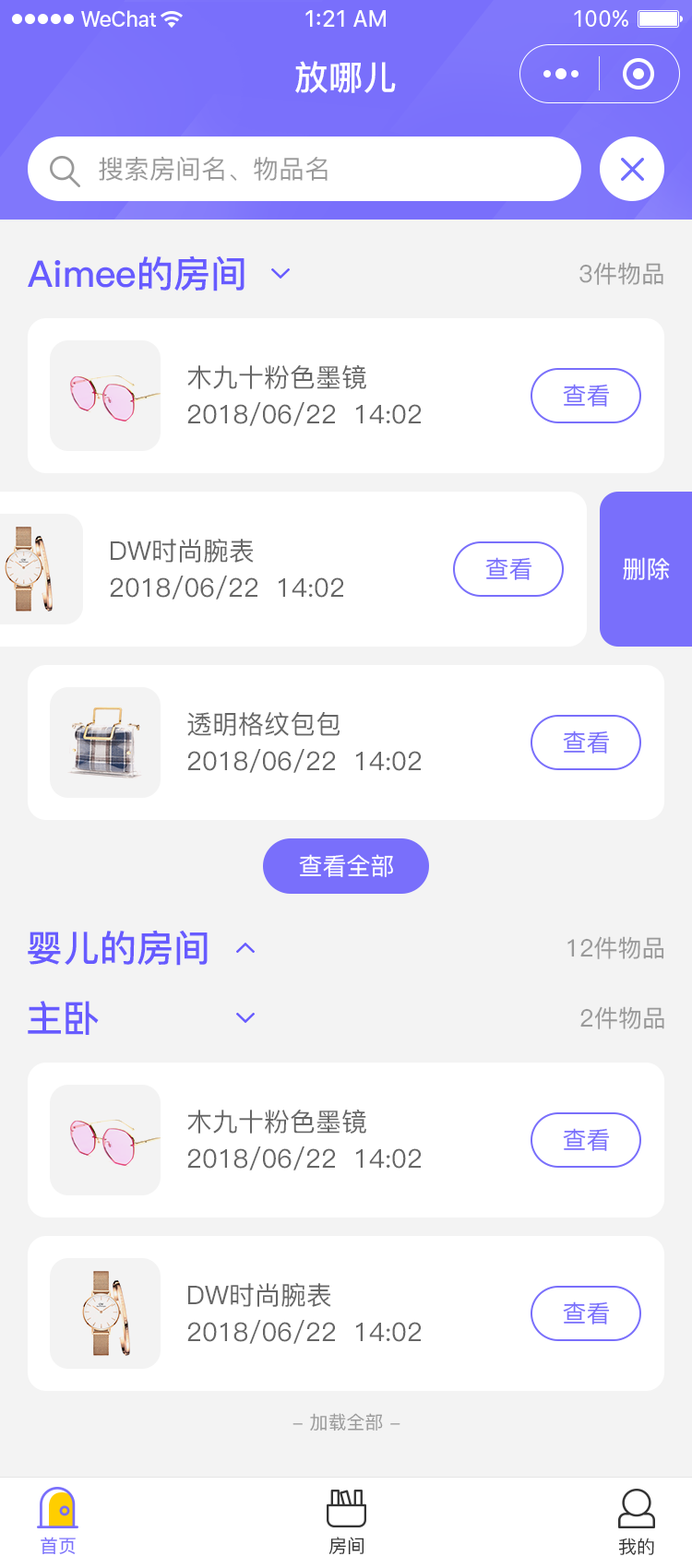
<style>
.page{position:relative;width:692px;height:1568px;background:#ffffff}
.page>*{position:absolute;margin:0}
.t1{font:34.1px "PingFang-SC-Bold";color:#ffffff}
.t2{font:25.8px "PingFang-SC-Medium";color:#999999}
.t3{font:36.9px "PingFang-SC-Bold";color:#675bff}
.t4{font:24px "PingFang-SC-Medium";color:#999999}
.t5{font:25.8px "PingFang-SC-Medium";color:#666666}
.t6{font:24px "PingFang-SC-Medium";color:#796ffb}
.t7{font:24px "PingFang-SC-Medium";color:#ffffff}
.t8{font:18.4px "PingFang-SC-Medium";color:#999999}
.t9{font:18.4px "PingFang-SC-Medium";color:#796ffb}
.t10{font:18.4px "PingFang-SC-Medium";color:#333333}
</style>
<div class="page">
<p class="t1" style="left:295px;top:61px;width:101px;height:32px">放哪儿</p>
<p class="t2" style="left:99px;top:156px;width:228px;height:25px">搜索房间名、物品名</p>
<p class="t3" style="left:28px;top:255px;width:216px;height:36px">Aimee的房间</p>
<p class="t4" style="left:579px;top:262px;width:84px;height:23px">3件物品</p>
<p class="t5" style="left:187px;top:364px;width:179px;height:25px">木九十粉色墨镜</p>
<p class="t6" style="left:563px;top:384px;width:47px;height:23px">查看</p>
<p class="t5" style="left:187px;top:402px;width:234px;height:24px">2018/06/22  14:02</p>
<p class="t5" style="left:111px;top:539px;width:143px;height:24px">DW时尚腕表</p>
<p class="t6" style="left:485px;top:557px;width:47px;height:23px">查看</p>
<p class="t7" style="left:623px;top:557px;width:47px;height:23px">删除</p>
<p class="t5" style="left:110px;top:576px;width:233px;height:24px">2018/06/22  14:02</p>
<p class="t5" style="left:187px;top:712px;width:152px;height:24px">透明格纹包包</p>
<p class="t6" style="left:563px;top:731px;width:47px;height:23px">查看</p>
<p class="t5" style="left:187px;top:749px;width:234px;height:24px">2018/06/22  14:02</p>
<p class="t7" style="left:299px;top:854px;width:94px;height:23px">查看全部</p>
<p class="t3" style="left:28px;top:930px;width:180px;height:36px">婴儿的房间</p>
<p class="t4" style="left:567px;top:936px;width:97px;height:23px">12件物品</p>
<p class="t3" style="left:28px;top:1001px;width:71px;height:34px">主卧</p>
<p class="t4" style="left:580px;top:1006px;width:84px;height:23px">2件物品</p>
<p class="t5" style="left:187px;top:1109px;width:179px;height:25px">木九十粉色墨镜</p>
<p class="t6" style="left:563px;top:1128px;width:47px;height:23px">查看</p>
<p class="t5" style="left:187px;top:1146px;width:234px;height:24px">2018/06/22  14:02</p>
<p class="t5" style="left:188px;top:1283px;width:143px;height:24px">DW时尚腕表</p>
<p class="t6" style="left:563px;top:1301px;width:47px;height:23px">查看</p>
<p class="t5" style="left:187px;top:1320px;width:234px;height:24px">2018/06/22  14:02</p>
<p class="t8" style="left:292px;top:1413px;width:108px;height:18px">- 加载全部 -</p>
<p class="t9" style="left:41px;top:1537px;width:35px;height:17px">首页</p>
<p class="t10" style="left:328px;top:1537px;width:36px;height:18px">房间</p>
<p class="t10" style="left:618px;top:1538px;width:36px;height:17px">我的</p>
</div>
